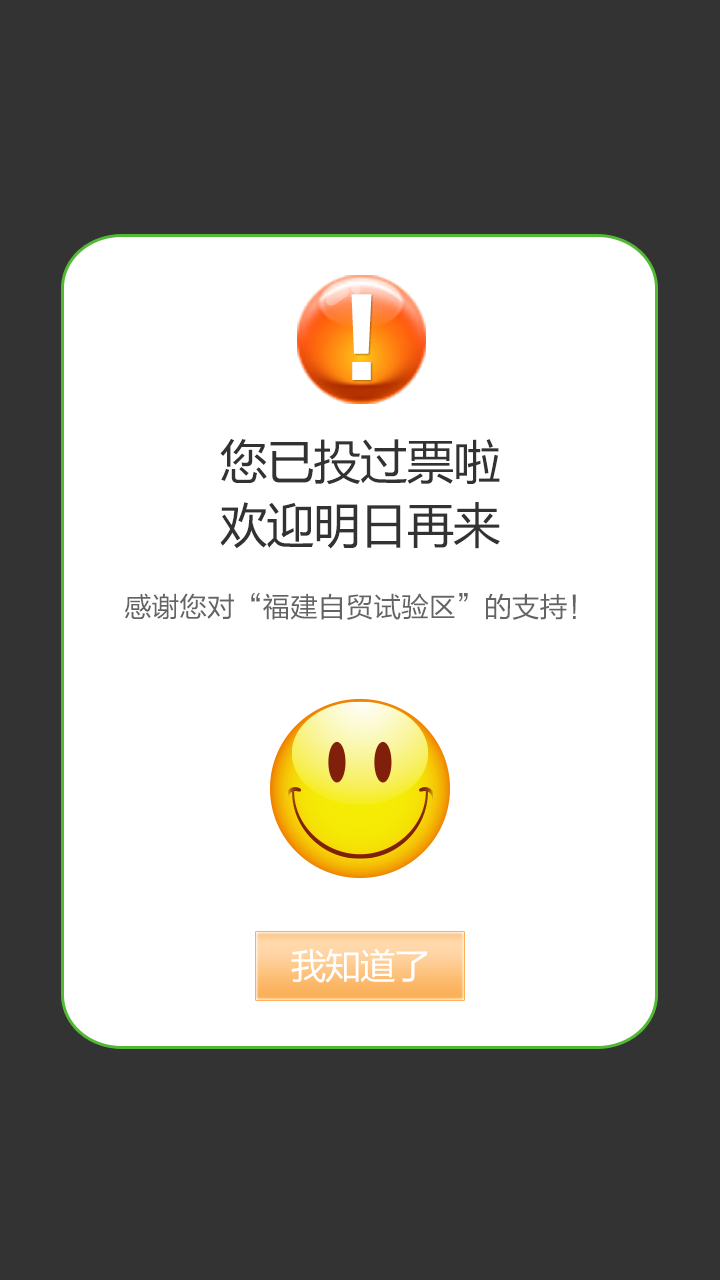
<style>
.page{position:relative;width:720px;height:1280px;background:#333333}
.page>*{position:absolute;margin:0}
.t1{font:99.7px "FZLTTHK--GBK1-0";color:#ffffff;scale:0.95 1}
.t2{font:47.2px "MicrosoftYaHei";letter-spacing:-0.01em;color:#323232}
.t3{font:47.6px "MicrosoftYaHei";letter-spacing:-0.01em;color:#323232}
.t4{font:28px "FZLTHK--GBK1-0";letter-spacing:-0.01em;color:#646464}
.t5{font:35px "MicrosoftYaHei";letter-spacing:-0.01em;color:#ffffff}
</style>
<div class="page">
<p class="t1" style="left:351px;top:294px;width:21px;height:86px">！</p>
<p class="t2" style="left:220px;top:438px;width:280px;height:47px">您已投过票啦</p>
<p class="t3" style="left:220px;top:502px;width:280px;height:47px">欢迎明日再来</p>
<p class="t4" style="left:125px;top:592px;width:451px;height:28px">感谢您对“福建自贸试验区”的支持！</p>
<p class="t5" style="left:291px;top:948px;width:136px;height:35px">我知道了</p>
</div>
